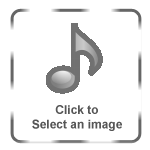
<style>
.page{position:relative;width:150px;height:150px;background:#ffffff}
.page>*{position:absolute;margin:0}
.t1{font:12px "Arial-BoldMT";color:#565656}
</style>
<div class="page">
<p class="t1" style="left:32px;top:105px;width:90px;height:26px;text-align:center">Click to<br>Select an image</p>
</div>
